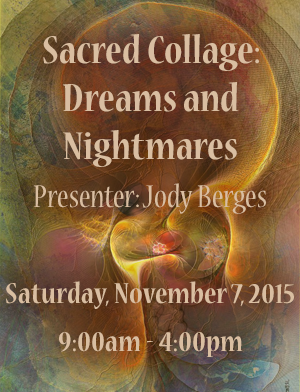
<style>
.page{position:relative;width:300px;height:392px}
.page>*{position:absolute;margin:0}
.t1{font:32px/48px "NuevaStd-BoldCond";color:#d9bea1}
.t2{font:43px/48px "NuevaStd-BoldCond";color:#d9bea1}
.t3{font:35px/48px "NuevaStd-Cond";color:#d9bea1}
</style>
<div class="page">
<p class="t1" style="left:6px;top:34px;width:288px;height:323px;text-align:center"><span class="t2">Sacred Collage: Dreams and Nightmares<br></span><span class="t3">Presenter: Jody Berges<br><br></span>Saturday, November 7, 2015<br>9:00am - 4:00pm</p>
</div>
